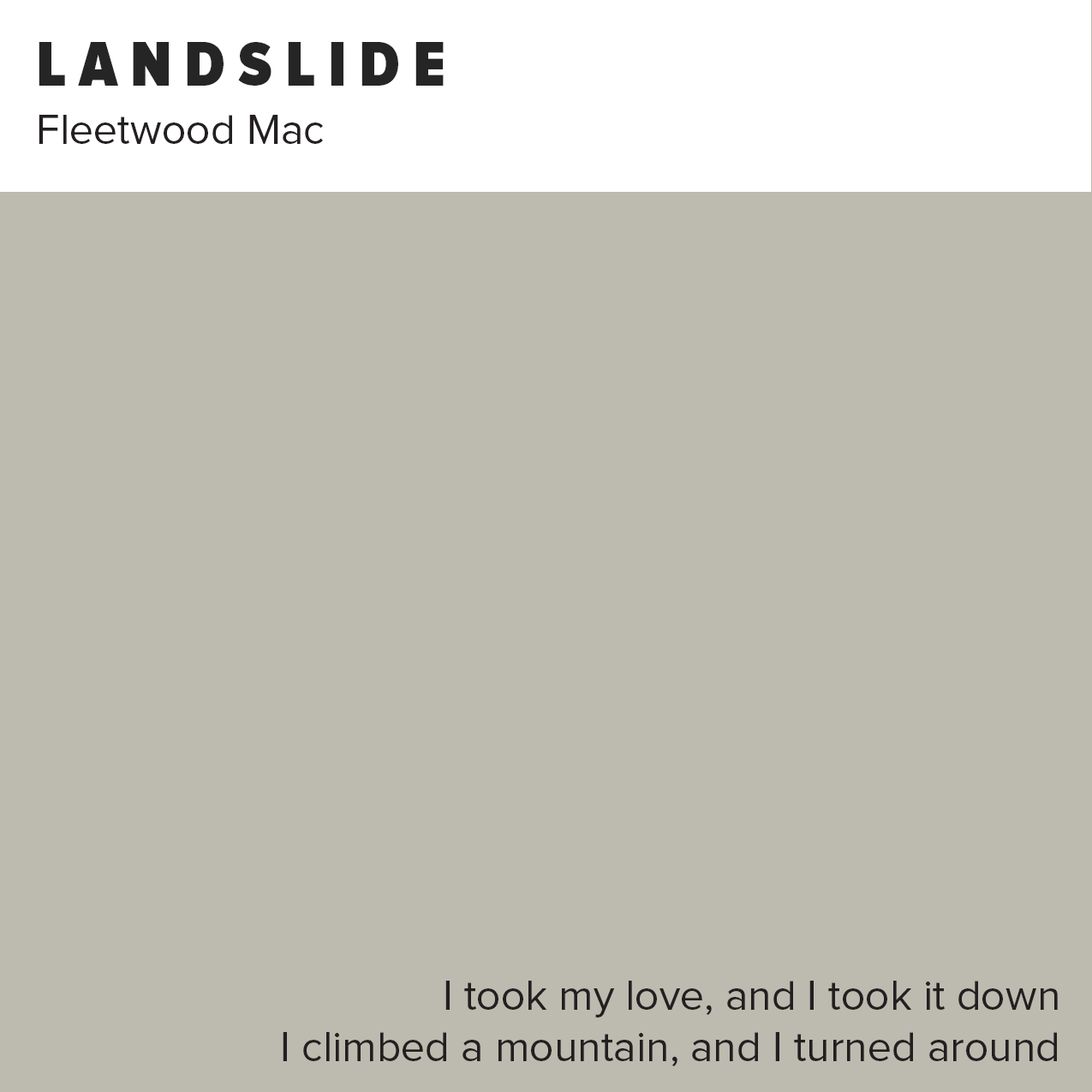
<style>
.page{position:relative;width:1092px;height:1092px;background:#bdbbb0}
.page>*{position:absolute;margin:0}
.t1{font:64.2px "ProximaNovaCond-Black";letter-spacing:0.2em;color:#252525}
.t2{font:42.8px "ProximaNova-Regular";color:#231f20}
</style>
<div class="page">
<p class="t1" style="left:39px;top:42px;width:405px;height:44px">LANDSLIDE</p>
<p class="t2" style="left:39px;top:115px;width:284px;height:29px">Fleetwood Mac</p>
<p class="t2" style="left:283px;top:981px;width:775px;height:85px;text-align:right">I took my love, and I took it down<br>I climbed a mountain, and I turned around</p>
</div>
